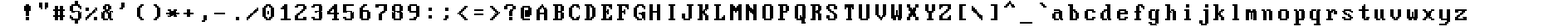
<style>
.page{position:relative;width:1568px;height:27px;background:#ffffff}
.page>*{position:absolute;margin:0}
.t1{font:24.9px "PerfectDOSVGA437";letter-spacing:0.08em;color:#000000}
</style>
<div class="page">
<p class="t1" style="left:24px;top:1px;width:1443px;height:24px">!"#$%&amp;'()*+,-./0123456789:;&lt;=&gt;?@ABCDEFGHIJKLMNOPQRSTUVWXYZ[\]^_`abcdefghijklmnopqrstuvwxyz</p>
</div>
